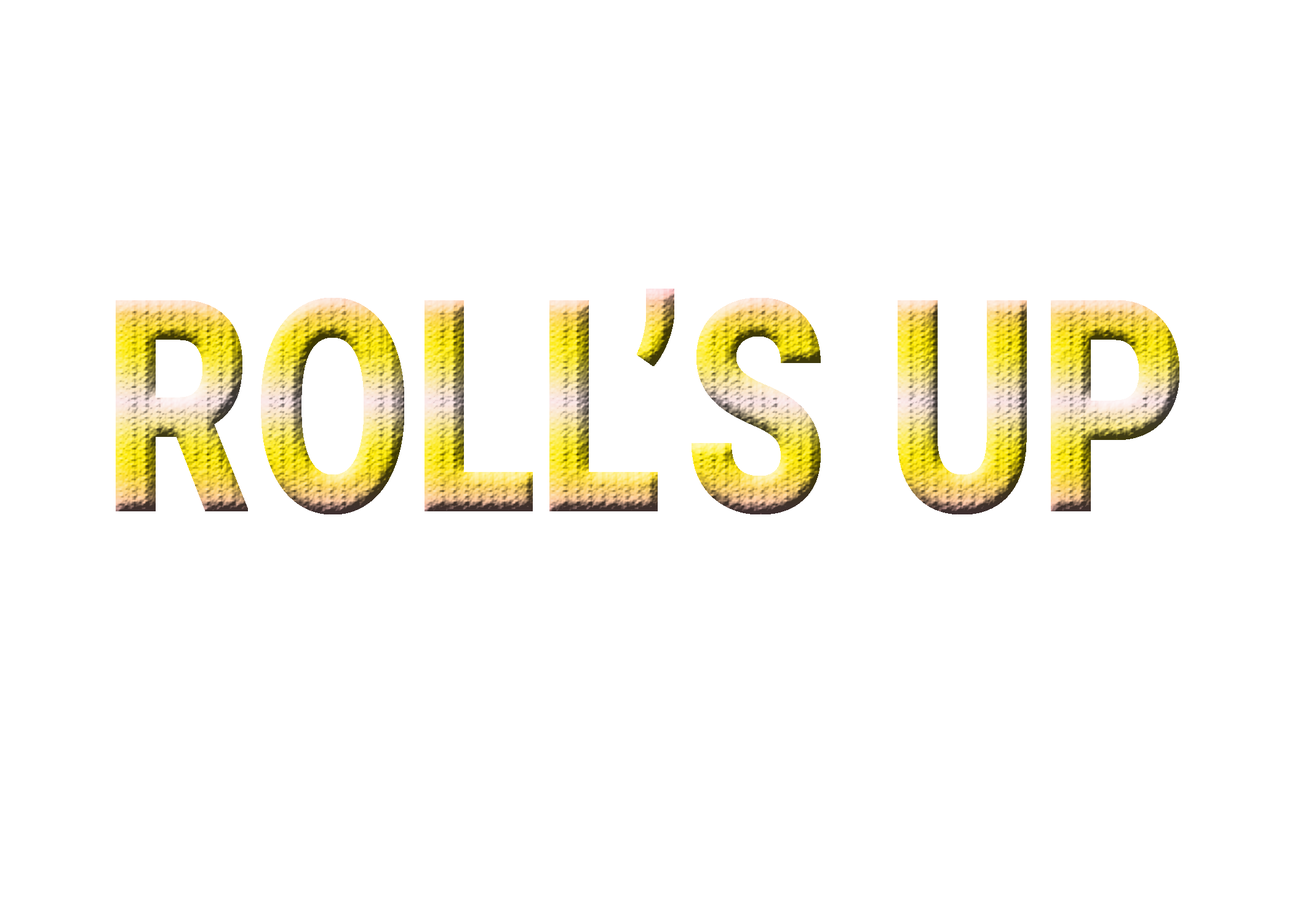
<style>
.page{position:relative;width:1292px;height:923px;background:#ffffff}
.page>*{position:absolute;margin:0}
.t1{font:296.4px "Roboto-Black";text-transform:uppercase;scale:0.78 1}
</style>
<div class="page">
<p class="t1" style="left:116px;top:289px;width:1063px;height:225px">Roll’s up</p>
</div>
